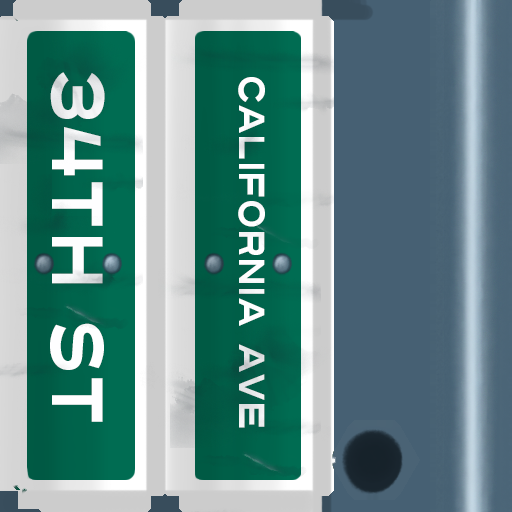
<style>
.page{position:relative;width:512px;height:512px}
.page>*{position:absolute;margin:0}
.t1{font:72px "Turnpike";color:#fefeff;scale:0.75 1}
.t2{font:36px "Turnpike";color:#fefeff;scale:0.75 1}
</style>
<div class="page">
<p class="t1" style="left:50px;top:72px;width:55px;height:350px;rotate:90deg">34th st</p>
<p class="t2" style="left:238px;top:77px;width:27px;height:351px;rotate:90deg">california ave</p>
</div>
